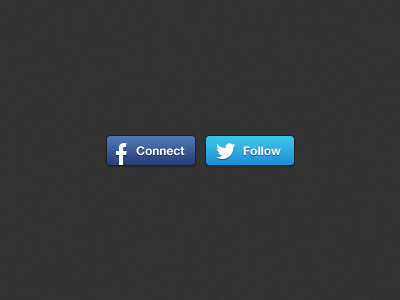
<style>
.page{position:relative;width:400px;height:300px}
.page>*{position:absolute;margin:0}
.t1{font:12px "HelveticaNeue-Bold";color:#ffffff}
</style>
<div class="page">
<p class="t1" style="left:136px;top:146px;width:49px;height:10px">Connect</p>
<p class="t1" style="left:243px;top:146px;width:38px;height:10px">Follow</p>
</div>
